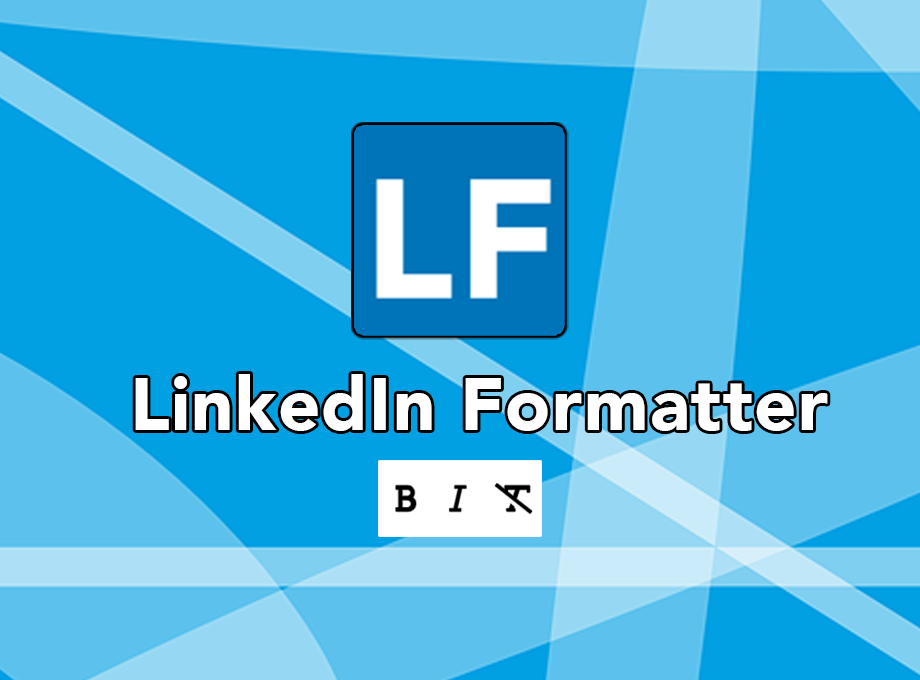
<style>
.page{position:relative;width:920px;height:680px;background:#00a0e3}
.page>*{position:absolute;margin:0}
.t1{font:73.8px "Avenir-Black";letter-spacing:0.02em;color:#ffffff}
</style>
<div class="page">
<p class="t1" style="left:135px;top:374px;width:693px;height:57px">LinkedIn Formatter</p>
</div>
